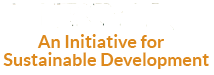
<style>
.page{position:relative;width:214px;height:75px;background:#ffffff}
.page>*{position:absolute;margin:0}
.t1{font:18px "Lato-Bold";color:#dd891d}
</style>
<div class="page">
<p class="t1" style="left:37px;top:34px;width:127px;height:14px">An Initiative for</p>
<p class="t1" style="left:3px;top:52px;width:206px;height:17px">Sustainable Development</p>
</div>
